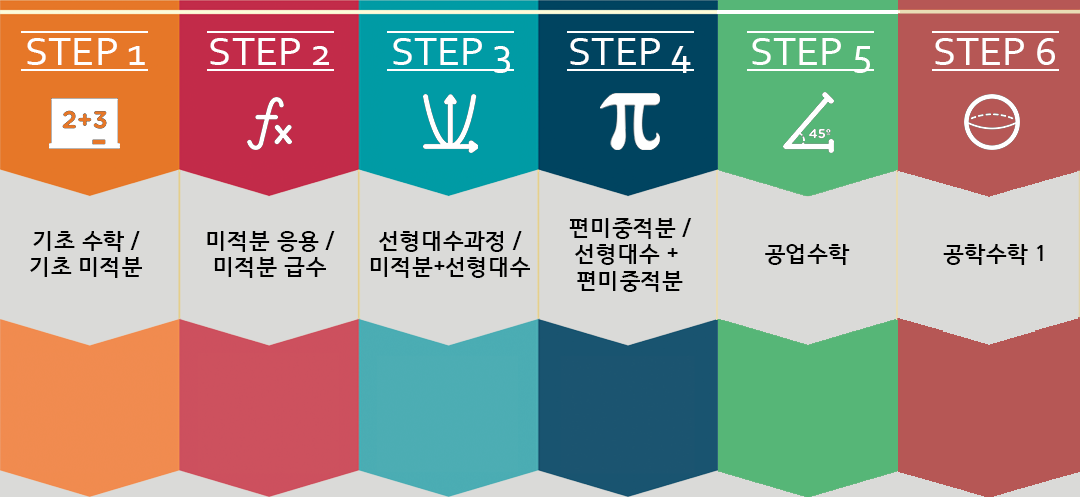
<style>
.page{position:relative;width:1080px;height:497px;background:#dadad8}
.page>*{position:absolute;margin:0}
.t1{font:42px "Corbel";color:#ffffff}
.t2{font:22px "HCRDotum-Bold";color:#000000}
</style>
<div class="page">
<p class="t1" style="left:27px;top:38px;width:118px;height:27px">STEP 1</p>
<p class="t1" style="left:210px;top:38px;width:119px;height:27px">STEP 2</p>
<p class="t1" style="left:393px;top:38px;width:117px;height:35px">STEP 3</p>
<p class="t1" style="left:570px;top:38px;width:121px;height:35px">STEP 4</p>
<p class="t1" style="left:752px;top:38px;width:118px;height:35px">STEP 5</p>
<p class="t1" style="left:935px;top:38px;width:120px;height:27px">STEP 6</p>
<p class="t2" style="left:569px;top:218px;width:123px;height:74px;text-align:center">편미중적분 /<br>선형대수 + <br>편미중적분</p>
<p class="t2" style="left:30px;top:231px;width:112px;height:47px;text-align:center">기초 수학 /<br>기초 미적분</p>
<p class="t2" style="left:207px;top:231px;width:128px;height:47px;text-align:center">미적분 응용 /<br>미적분 급수</p>
<p class="t2" style="left:370px;top:231px;width:160px;height:47px;text-align:center">선형대수과정 /<br>미적분+선형대수</p>
<p class="t2" style="left:765px;top:244px;width:85px;height:21px">공업수학</p>
<p class="t2" style="left:943px;top:244px;width:100px;height:21px">공학수학 1</p>
</div>
